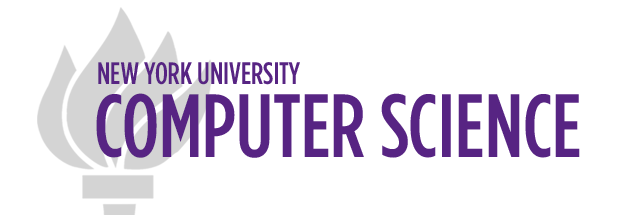
<style>
.page{position:relative;width:640px;height:215px;background:#ffffff}
.page>*{position:absolute;margin:0}
.t1{font:31px "GothamCondensed-Medium";color:#572483;font-variant:small-caps}
.t2{font:89.5px "GothamCondensed-Medium";color:#572483;font-variant:small-caps}
</style>
<div class="page">
<p class="t1" style="left:98px;top:62px;width:202px;height:23px">NEW YORK UNIVERSITY</p>
<p class="t2" style="left:96px;top:93px;width:484px;height:65px">COMPUTER SCIENCE</p>
</div>
